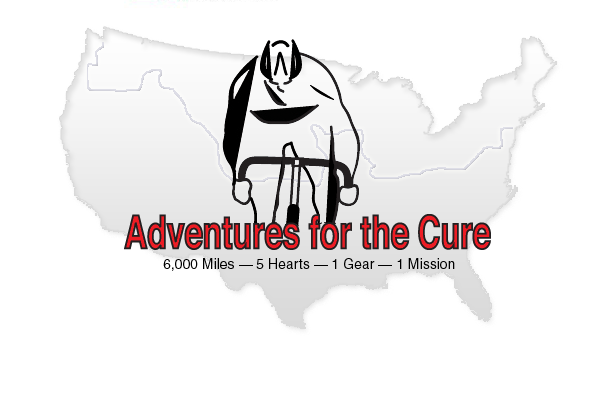
<style>
.page{position:relative;width:600px;height:400px;background:#ffffff}
.page>*{position:absolute;margin:0}
.t1{font:14px "Helvetica";color:#000000}
</style>
<div class="page">
<p class="t1" style="left:163px;top:258px;width:292px;height:13px">6,000 Miles — 5 Hearts — 1 Gear — 1 Mission</p>
</div>
